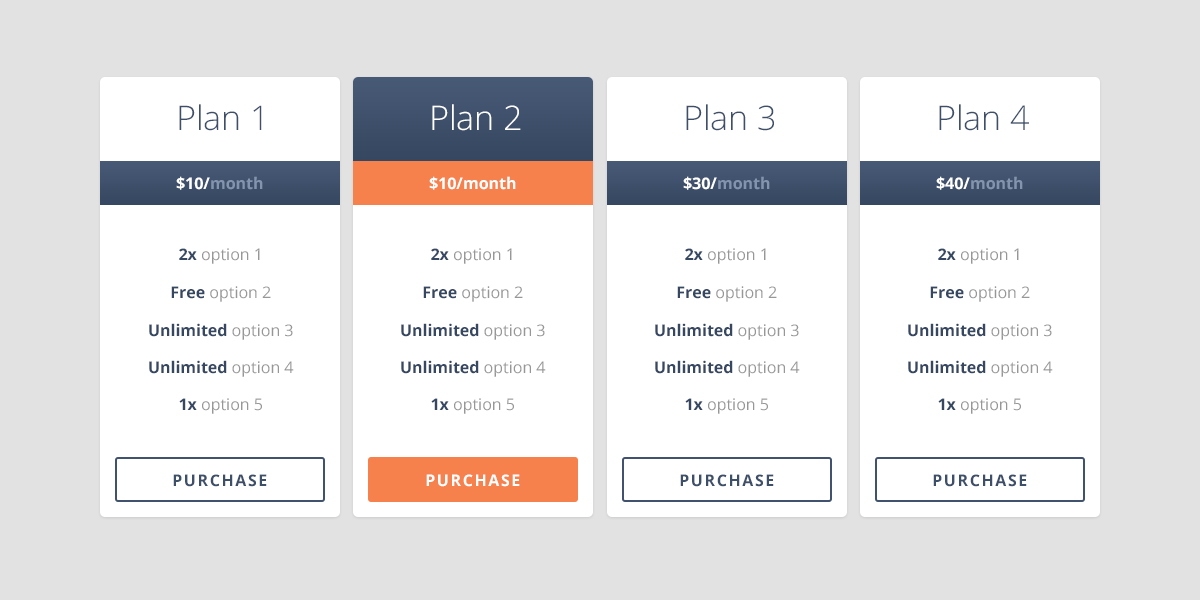
<style>
.page{position:relative;width:1200px;height:600px;background:#ffffff}
.page>*{position:absolute;margin:0}
.t1{font:34px "OpenSans-Light";color:#3e4f6a}
.t2{font:34px "OpenSans-Light";color:#ffffff}
.t3{font:16px "OpenSans-Bold";color:#8394ae}
.t4{font:16px "OpenSans-Bold";color:#ffffff}
.t5{font:16px "OpenSans";color:#979797}
.t6{font:16px "OpenSans-Bold";color:#364761}
.t7{font:16px "OpenSans-Bold";letter-spacing:0.1em;color:#3e4f6a}
.t8{font:16px "OpenSans-Bold";letter-spacing:0.1em;color:#ffffff}
</style>
<div class="page">
<p class="t1" style="left:179px;top:104px;width:83px;height:27px">Plan 1</p>
<p class="t2" style="left:432px;top:104px;width:89px;height:27px">Plan 2</p>
<p class="t1" style="left:686px;top:104px;width:88px;height:27px">Plan 3</p>
<p class="t1" style="left:939px;top:104px;width:90px;height:27px">Plan 4</p>
<p class="t3" style="left:176px;top:176px;width:87px;height:14px"><span class="t4">$10/</span>month</p>
<p class="t4" style="left:429px;top:176px;width:87px;height:14px">$10/month</p>
<p class="t3" style="left:683px;top:176px;width:87px;height:14px"><span class="t4">$30/</span>month</p>
<p class="t3" style="left:936px;top:176px;width:87px;height:14px"><span class="t4">$40/</span>month</p>
<p class="t5" style="left:179px;top:248px;width:81px;height:16px"><span class="t6">2x </span>option 1</p>
<p class="t5" style="left:431px;top:248px;width:81px;height:16px"><span class="t6">2x </span>option 1</p>
<p class="t5" style="left:685px;top:248px;width:81px;height:16px"><span class="t6">2x </span>option 1</p>
<p class="t5" style="left:938px;top:248px;width:81px;height:16px"><span class="t6">2x </span>option 1</p>
<p class="t5" style="left:171px;top:286px;width:100px;height:16px"><span class="t6">Free </span>option 2</p>
<p class="t5" style="left:423px;top:286px;width:100px;height:16px"><span class="t6">Free </span>option 2</p>
<p class="t5" style="left:677px;top:286px;width:100px;height:16px"><span class="t6">Free </span>option 2</p>
<p class="t5" style="left:930px;top:286px;width:100px;height:16px"><span class="t6">Free </span>option 2</p>
<p class="t6" style="left:149px;top:323px;width:144px;height:17px">Unlimited <span class="t5">option 3</span></p>
<p class="t6" style="left:401px;top:323px;width:144px;height:17px">Unlimited <span class="t5">option 3</span></p>
<p class="t6" style="left:655px;top:323px;width:144px;height:17px">Unlimited <span class="t5">option 3</span></p>
<p class="t6" style="left:908px;top:323px;width:144px;height:17px">Unlimited <span class="t5">option 3</span></p>
<p class="t6" style="left:149px;top:360px;width:145px;height:17px">Unlimited <span class="t5">option 4</span></p>
<p class="t6" style="left:401px;top:360px;width:145px;height:17px">Unlimited <span class="t5">option 4</span></p>
<p class="t6" style="left:655px;top:360px;width:145px;height:17px">Unlimited <span class="t5">option 4</span></p>
<p class="t6" style="left:908px;top:360px;width:145px;height:17px">Unlimited <span class="t5">option 4</span></p>
<p class="t5" style="left:179px;top:398px;width:83px;height:16px"><span class="t6">1x </span>option 5</p>
<p class="t5" style="left:431px;top:398px;width:83px;height:16px"><span class="t6">1x </span>option 5</p>
<p class="t5" style="left:685px;top:398px;width:83px;height:16px"><span class="t6">1x </span>option 5</p>
<p class="t5" style="left:938px;top:398px;width:83px;height:16px"><span class="t6">1x </span>option 5</p>
<p class="t7" style="left:173px;top:474px;width:94px;height:13px">PURCHASE</p>
<p class="t8" style="left:426px;top:474px;width:94px;height:13px">PURCHASE</p>
<p class="t7" style="left:680px;top:474px;width:94px;height:13px">PURCHASE</p>
<p class="t7" style="left:933px;top:474px;width:94px;height:13px">PURCHASE</p>
</div>
